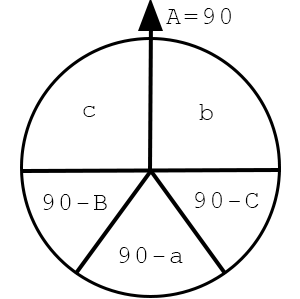
<style>
.page{position:relative;width:300px;height:299px;background:#ffffff}
.page>*{position:absolute;margin:0}
.t1{font:25px "CourierNewPSMT";letter-spacing:0.1em;color:#000000}
</style>
<div class="page">
<p class="t1" style="left:166px;top:8px;width:65px;height:16px">A=90</p>
<p class="t1" style="left:83px;top:106px;width:12px;height:11px">c</p>
<p class="t1" style="left:199px;top:104px;width:14px;height:16px">b</p>
<p class="t1" style="left:43px;top:194px;width:64px;height:16px">90-B</p>
<p class="t1" style="left:195px;top:192px;width:64px;height:16px">90-C</p>
<p class="t1" style="left:119px;top:247px;width:64px;height:16px">90-a</p>
</div>
